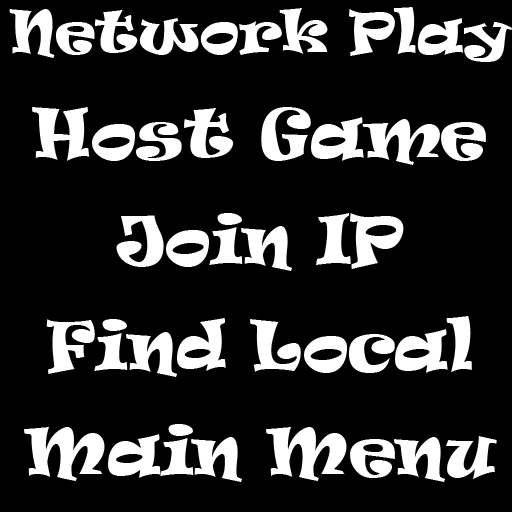
<style>
.page{position:relative;width:512px;height:512px;background:#000000}
.page>*{position:absolute;margin:0}
.t1{font:64px "Ravie";color:#ffffff}
.t2{font:54.7px "Ravie";color:#ffffff}
</style>
<div class="page">
<p class="t1" style="left:9px;top:7px;width:503px;height:475px;text-align:center"><span class="t2">Network Play<br><br><br><br></span>Host Game<br><br><br><br>Join IP<br><br><br><br>Find Local<br><br><br><br>Main Menu</p>
</div>
